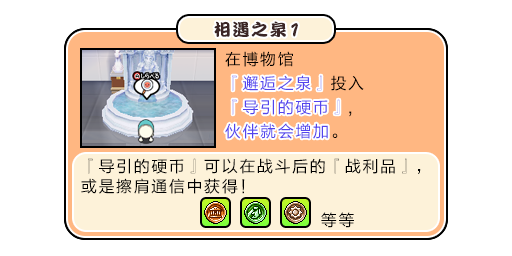
<style>
.page{position:relative;width:512px;height:256px;background:#ffffff}
.page>*{position:absolute;margin:0}
.t1{font:17px "DFPKanTingLiuW9";letter-spacing:0.1em;color:#3b2626}
.t2{font:19.5px "DFPKanTingLiuW9";letter-spacing:0.1em;color:#3b2626;scale:0.87 1}
.t3{font:16px/24px "FZLTHJW--GB1-0";letter-spacing:0.1em;color:#5444ed}
.t4{font:16px/24px "FZLTHJW--GB1-0";letter-spacing:0.1em;color:#000000}
.t5{font:16px/20px "FZLTHJW--GB1-0";letter-spacing:0.1em;color:#000000}
.t6{font:16px "FZLTHJW--GB1-0";letter-spacing:0.1em;color:#000000}
</style>
<div class="page">
<p class="t1" style="left:214px;top:21px;width:84px;height:16px">相遇之泉<span class="t2">1</span></p>
<p class="t3" style="left:225px;top:51px;width:139px;height:88px"><span class="t4">在博物馆<br></span>『相遇之泉』<span class="t4">投入<br></span>『导引的硬币』<span class="t4">,<br></span>伙伴就会增加<span class="t4">。</span></p>
<p class="t3" style="left:225px;top:75px;width:115px;height:64px">『邂逅之泉』<br>『导引的硬币』<br>伙伴就会增加</p>
<p class="t5" style="left:81px;top:158px;width:340px;height:36px">『导引的硬币』可以在战斗后的『战利品』，<br>或是擦肩通信中获得！</p>
<p class="t6" style="left:321px;top:212px;width:33px;height:16px">等等</p>
</div>
